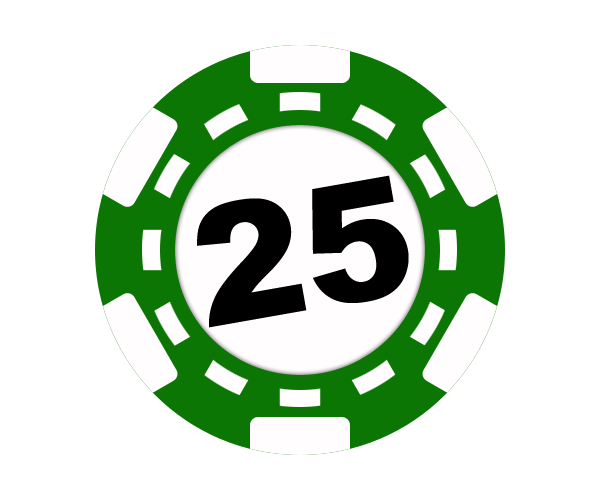
<style>
.page{position:relative;width:600px;height:500px;background:#ffffff}
.page>*{position:absolute;margin:0}
.t1{font:165px "Arial-Black";color:#000000}
</style>
<div class="page">
<p class="t1" style="left:197px;top:175px;width:212px;height:153px;rotate:-10deg">25</p>
</div>
